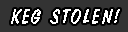
<style>
.page{position:relative;width:128px;height:32px;background:#333333}
.page>*{position:absolute;margin:0}
.t1{font:20px "DomDiagonalBT-Regular";letter-spacing:0.075em;color:#ffffff}
</style>
<div class="page">
<p class="t1" style="left:11px;top:9px;width:30px;height:15px">KEG</p>
<p class="t1" style="left:50px;top:9px;width:70px;height:15px">STOLEN!</p>
</div>
